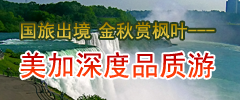
<style>
.page{position:relative;width:240px;height:100px}
.page>*{position:absolute;margin:0}
.t1{font:18px "SimHei"}
.t2{font:28px "SimHei"}
</style>
<div class="page">
<p class="t1" style="left:21px;top:22px;width:70px;height:17px">国旅出境</p>
<p class="t1" style="left:99px;top:22px;width:116px;height:17px">金秋赏枫叶---</p>
<p class="t2" style="left:20px;top:52px;width:194px;height:27px">美加深度品质游</p>
</div>
